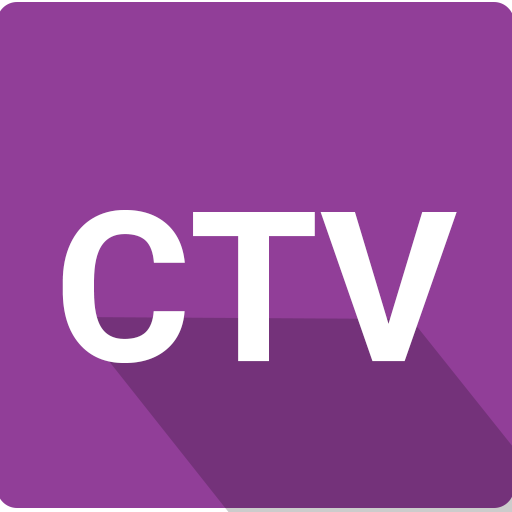
<style>
.page{position:relative;width:512px;height:512px;background:#913e98}
.page>*{position:absolute;margin:0}
.t1{font:210px "Roboto-Bold";color:#ffffff}
</style>
<div class="page">
<p class="t1" style="left:62px;top:210px;width:395px;height:153px">CTV</p>
</div>
